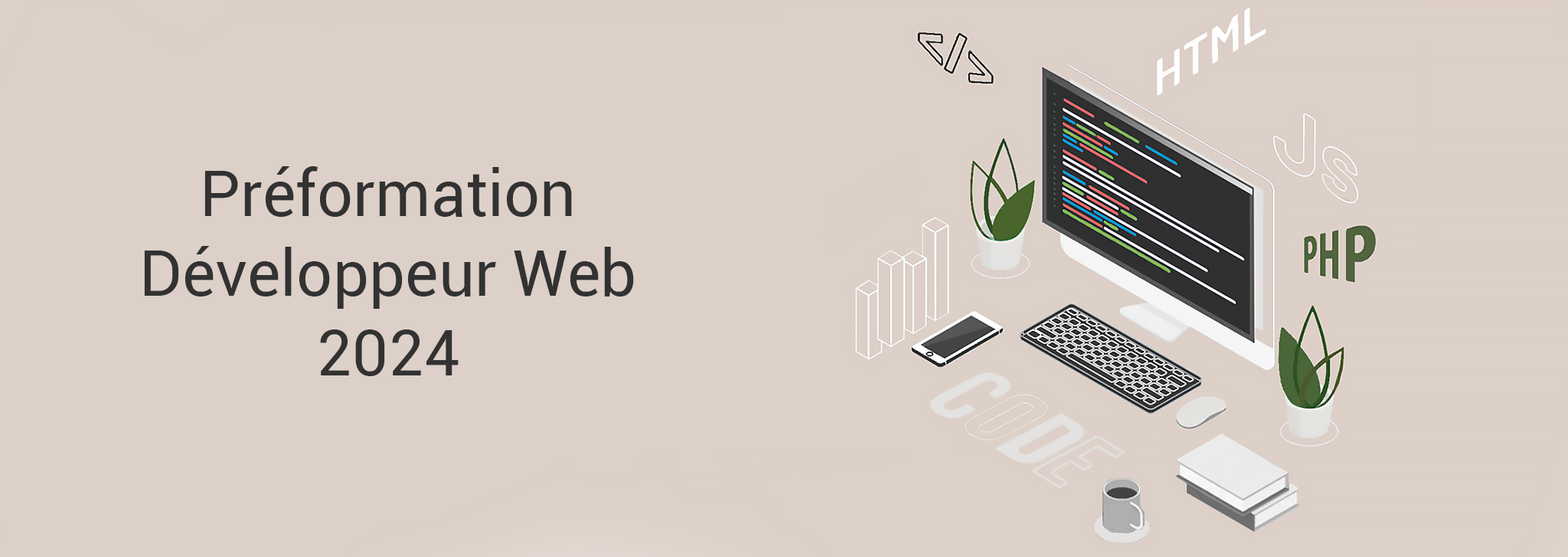
<style>
.page{position:relative;width:1568px;height:557px;background:#ddd0c8}
.page>*{position:absolute;margin:0}
.t1{font:63.8px/79.8px "Roboto-Regular";color:#323232}
</style>
<div class="page">
<p class="t1" style="left:144px;top:166px;width:490px;height:210px;text-align:center">Préformation Développeur Web<br>2024</p>
</div>
